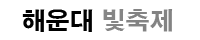
<style>
.page{position:relative;width:200px;height:40px;background:#ffffff}
.page>*{position:absolute;margin:0}
.t1{font:24px "H2gtrE"}
</style>
<div class="page">
<p class="t1" style="left:22px;top:9px;width:151px;height:23px">해운대 빛축제</p>
</div>
